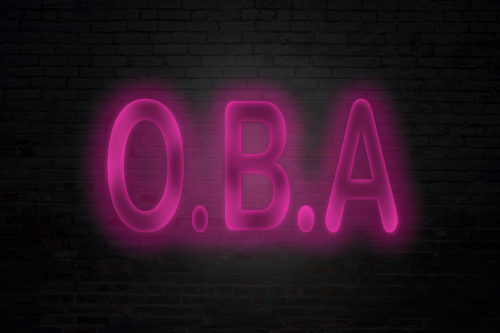
<style>
.page{position:relative;width:500px;height:333px}
.page>*{position:absolute;margin:0}
.t1{font:180px "ArialRoundedMTBold";text-transform:uppercase;scale:0.6 1}
</style>
<div class="page">
<p class="t1" style="left:107px;top:98px;width:291px;height:135px">o.b.a</p>
</div>
